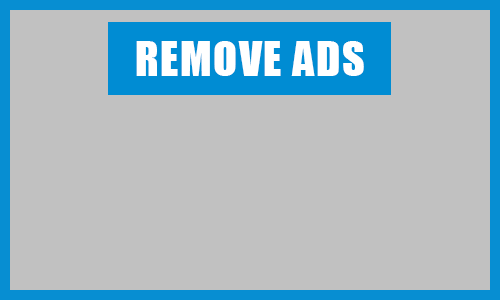
<style>
.page{position:relative;width:500px;height:300px;background:#c1c1c1}
.page>*{position:absolute;margin:0}
.t1{font:44.4px "Impact";letter-spacing:0.03em;color:#ffffff;text-transform:uppercase}
</style>
<div class="page">
<p class="t1" style="left:136px;top:41px;width:228px;height:35px">Remove Ads</p>
</div>
